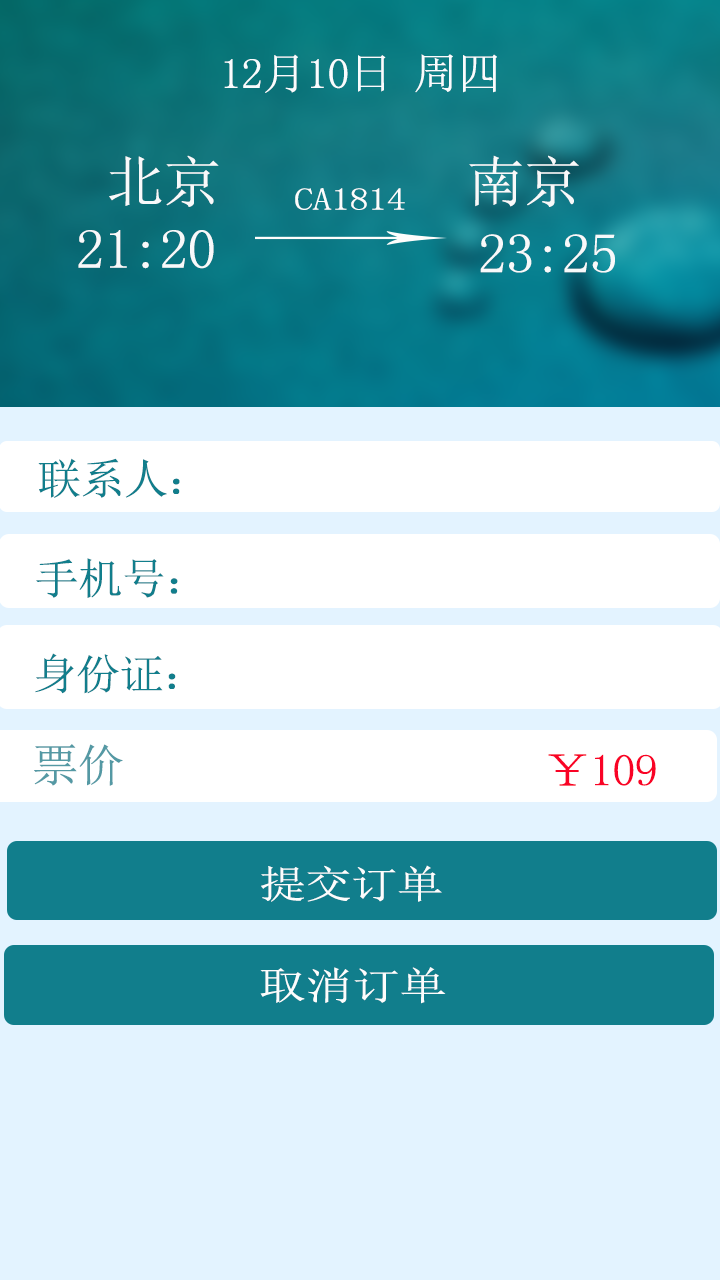
<style>
.page{position:relative;width:720px;height:1280px;background:#e3f3ff}
.page>*{position:absolute;margin:0}
.t1{font:42.5px "NSimSun";letter-spacing:-0.02em;color:#f9fcfe;scale:1.05 1}
.t2{font:55.6px "NSimSun";letter-spacing:-0.02em;color:#f8f9fa;scale:1.05 1}
.t3{font:31.3px "NSimSun";letter-spacing:-0.02em;color:#fcfdfd;scale:1.23 1}
.t4{font:42.5px "NSimSun";letter-spacing:-0.02em;color:#117e8c;scale:1.05 1}
.t5{font:44.7px "NSimSun";letter-spacing:-0.02em;color:#5499a4;scale:1.05 1}
.t6{font:44.7px "NSimSun";letter-spacing:-0.02em;color:#f90326;scale:1.05 1}
.t7{font:38.9px "NSimSun";letter-spacing:-0.02em;color:#fcfdfd;scale:1.2 1}
.t8{font:38.9px "NSimSun";letter-spacing:-0.02em;color:#fcfdfd;scale:1.23 1}
</style>
<div class="page">
<p class="t1" style="left:224px;top:54px;width:273px;height:39px">12月10日 周四</p>
<p class="t2" style="left:109px;top:155px;width:110px;height:52px">北京</p>
<p class="t2" style="left:469px;top:155px;width:110px;height:52px">南京</p>
<p class="t3" style="left:295px;top:188px;width:110px;height:22px">CA1814</p>
<p class="t2" style="left:78px;top:230px;width:136px;height:39px">21:20</p>
<p class="t2" style="left:480px;top:234px;width:135px;height:39px">23:25</p>
<p class="t4" style="left:38px;top:458px;width:142px;height:40px">联系人：</p>
<p class="t4" style="left:36px;top:558px;width:142px;height:40px">手机号：</p>
<p class="t4" style="left:35px;top:653px;width:141px;height:41px">身份证：</p>
<p class="t5" style="left:34px;top:744px;width:89px;height:42px">票价</p>
<p class="t6" style="left:548px;top:754px;width:108px;height:32px">￥109</p>
<p class="t7" style="left:261px;top:865px;width:181px;height:37px">提交订单</p>
<p class="t8" style="left:260px;top:967px;width:186px;height:37px">取消订单</p>
</div>
